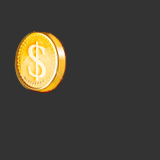
<style>
.page{position:relative;width:160px;height:160px;background:#333333}
.page>*{position:absolute;margin:0}
.t1{font:77.3px "ArabicTypesetting";color:#fff6df;scale:0.87 1}
</style>
<div class="page">
<p class="t1" style="left:28px;top:41px;width:18px;height:40px;rotate:14deg">$</p>
</div>
